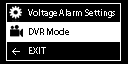
<style>
.page{position:relative;width:128px;height:64px;background:#000000}
.page>*{position:absolute;margin:0}
.t1{font:9px "MyriadPro-Regular";color:#ffffff}
.t2{font:9px "MyriadPro-Regular";color:#000000}
</style>
<div class="page">
<p class="t1" style="left:28px;top:9px;width:87px;height:9px">Voltage Alarm Settings</p>
<p class="t2" style="left:29px;top:28px;width:40px;height:7px">DVR Mode</p>
<p class="t1" style="left:29px;top:47px;width:17px;height:7px">EXIT</p>
</div>
